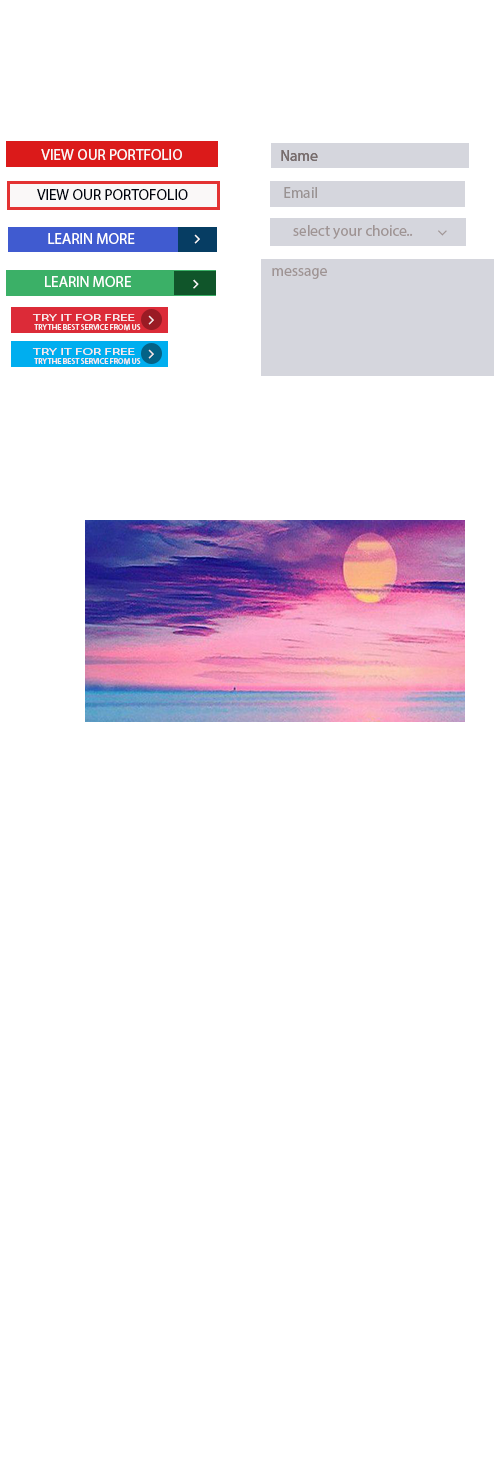
<style>
.page{position:relative;width:500px;height:1466px;background:#ffffff}
.page>*{position:absolute;margin:0}
.t1{font:15.2px "MyriadPro-Regular";color:#faf8f8}
.t2{font:15.2px "MyriadPro-Regular";color:#786d6d}
.t3{font:15.2px "MyriadPro-Regular";color:#01040f}
.t4{font:15.2px "MyriadPro-Regular";color:#9a9393}
.t5{font:15.2px "MyriadPro-Regular";color:#ffffff}
.t6{font:15.2px "MyriadPro-Regular";color:#9f9494}
.t7{font:9.2px "MyriadPro-Regular";color:#f8ebec;scale:1.66 1}
.t8{font:8px "MyriadPro-Regular";color:#f8ebec}
</style>
<div class="page">
<p class="t1" style="left:41px;top:149px;width:141px;height:11px">VIEW OUR PORTFOLIO</p>
<p class="t2" style="left:281px;top:150px;width:37px;height:11px">Name</p>
<p class="t2" style="left:281px;top:150px;width:37px;height:11px">Name</p>
<p class="t3" style="left:37px;top:189px;width:151px;height:11px">VIEW OUR PORTOFOLIO</p>
<p class="t4" style="left:284px;top:187px;width:33px;height:11px">Email</p>
<p class="t5" style="left:48px;top:233px;width:87px;height:11px">LEARIN MORE</p>
<p class="t6" style="left:293px;top:225px;width:120px;height:14px">select your choice..</p>
<p class="t6" style="left:272px;top:268px;width:55px;height:11px">message</p>
<p class="t5" style="left:45px;top:276px;width:86px;height:11px">LEARIN MORE</p>
<p class="t7" style="left:32px;top:314px;width:103px;height:7px">TRY IT FOR FREE</p>
<p class="t8" style="left:34px;top:324px;width:107px;height:7px">TRY THE BEST SERVICE FROM US</p>
<p class="t7" style="left:32px;top:348px;width:103px;height:7px">TRY IT FOR FREE</p>
<p class="t8" style="left:34px;top:358px;width:107px;height:7px">TRY THE BEST SERVICE FROM US</p>
</div>
